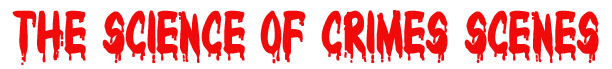
<style>
.page{position:relative;width:612px;height:69px;background:#ffffff}
.page>*{position:absolute;margin:0}
.t1{font:54px "Bloody";color:#f10a0a;font-weight:bold;scale:0.79 1}
</style>
<div class="page">
<p class="t1" style="left:12px;top:10px;width:587px;height:55px">The Science of Crimes SceNES</p>
</div>
